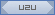
<style>
.page{position:relative;width:55px;height:15px}
.page>*{position:absolute;margin:0}
.t1{font:8px "BitDustTwo";color:#666666}
</style>
<div class="page">
<p class="t1" style="left:19px;top:5px;width:17px;height:5px">U2U</p>
</div>
